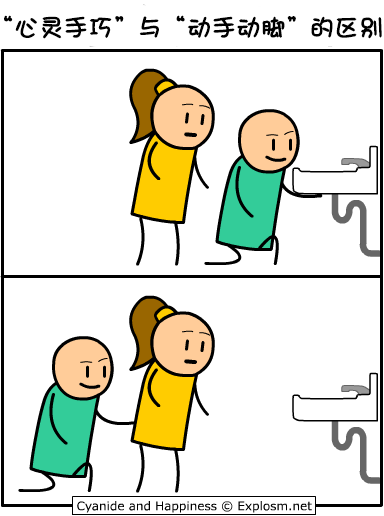
<style>
.page{position:relative;width:384px;height:516px;background:#ffffff}
.page>*{position:absolute;margin:0}
.t1{font:24px "DFGirl";color:#000000;font-weight:bold}
</style>
<div class="page">
<p class="t1" style="left:4px;top:15px;width:378px;height:24px">“心灵手巧”与“动手动脚”的区别</p>
</div>
